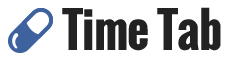
<style>
.page{position:relative;width:240px;height:60px;background:#ffffff}
.page>*{position:absolute;margin:0}
.t1{font:48px "Oswald-Bold";letter-spacing:-0.02em;color:#222222}
</style>
<div class="page">
<p class="t1" style="left:62px;top:7px;width:159px;height:44px">Time Tab</p>
</div>
